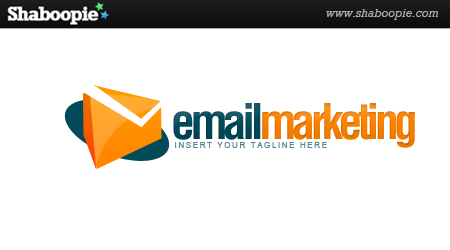
<style>
.page{position:relative;width:450px;height:250px;background:#ffffff}
.page>*{position:absolute;margin:0}
.t1{font:48px "Helvetica-Condensed-Bold";letter-spacing:-0.1em;color:#ff8400}
.t2{font:48px "Helvetica-Condensed-Bold";letter-spacing:-0.1em;color:#004a5a}
.t3{font:8px "ArialMT";letter-spacing:0.2em;color:#52848f}
</style>
<div class="page">
<p class="t1" style="left:173px;top:103px;width:242px;height:45px"><span class="t2">email</span>marketing</p>
<p class="t3" style="left:175px;top:142px;width:152px;height:6px">INSERT YOUR TAGLINE HERE</p>
</div>
